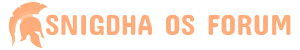
<style>
.page{position:relative;width:300px;height:50px;background:#ffffff}
.page>*{position:absolute;margin:0}
.t1{font:29.3px "ConcertOne-Regular";color:#ffab7a}
</style>
<div class="page">
<p class="t1" style="left:46px;top:14px;width:245px;height:22px">SNIGDHA OS FORUM</p>
</div>
